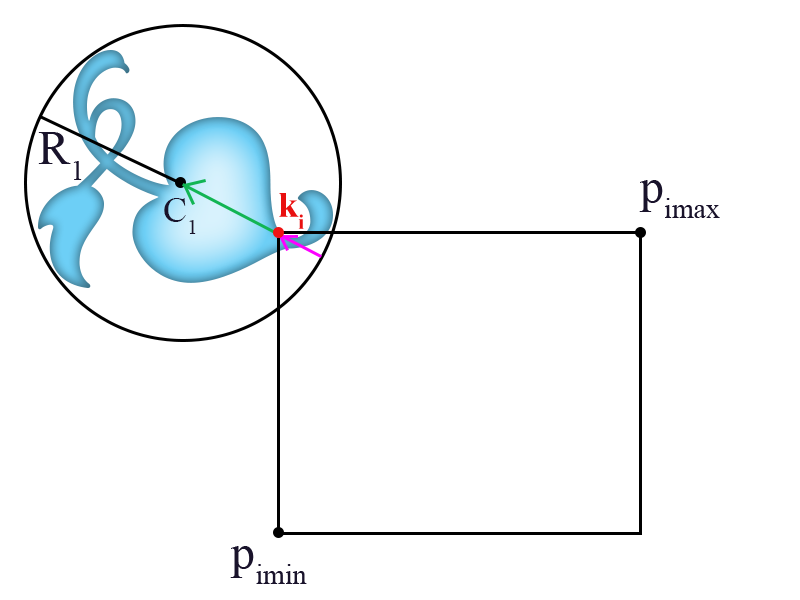
<style>
.page{position:relative;width:800px;height:600px;background:#ffffff}
.page>*{position:absolute;margin:0}
.t1{font:48px "TimesNewRomanPSMT";color:#19132b}
.t2{font:36px "TimesNewRomanPSMT";color:#19132b}
.t3{font:36px "TimesNewRomanPS-BoldMT";color:#e91010}
</style>
<div class="page">
<p class="t1" style="left:38px;top:132px;width:44px;height:48px">R1</p>
<p class="t1" style="left:639px;top:180px;width:81px;height:38px">pimax</p>
<p class="t2" style="left:164px;top:198px;width:32px;height:36px">C1</p>
<p class="t3" style="left:279px;top:193px;width:25px;height:36px">ki</p>
<p class="t1" style="left:230px;top:546px;width:77px;height:38px">pimin</p>
</div>
